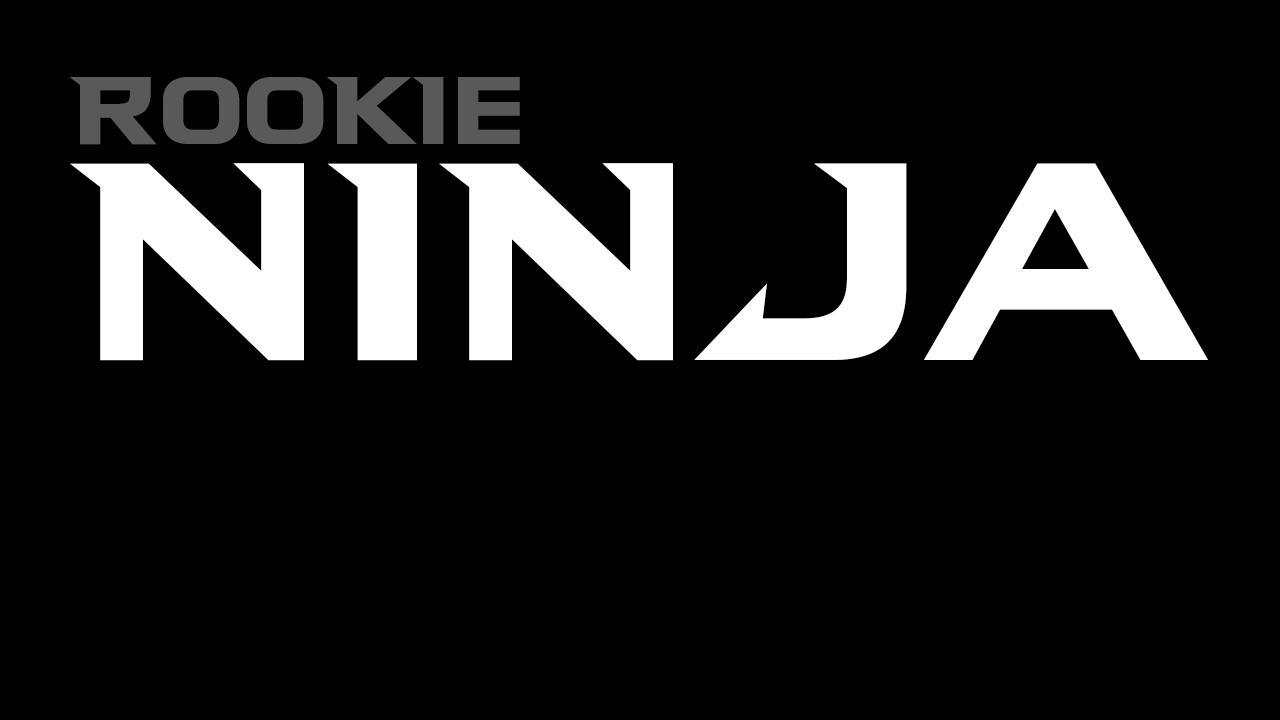
<style>
.page{position:relative;width:1280px;height:720px;background:#000000}
.page>*{position:absolute;margin:0}
.t1{font:94.6px "NinjaTurtles-Regular";color:#595959}
.t2{font:277.4px "NinjaTurtles-Regular";color:#ffffff}
</style>
<div class="page">
<p class="t1" style="left:69px;top:77px;width:451px;height:68px">RooKIe</p>
<p class="t2" style="left:70px;top:163px;width:1138px;height:198px">NINJa</p>
</div>
